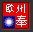
<style>
.page{position:relative;width:33px;height:32px;background:#f20000}
.page>*{position:absolute;margin:0}
.t1{font:10.4px "SimSun";color:#ffffff}
.t2{font:11.7px "SimSun";color:#ffffff}
</style>
<div class="page">
<p class="t1" style="left:6px;top:4px;width:19px;height:9px">欧州</p>
<p class="t2" style="left:16px;top:15px;width:11px;height:12px">奉</p>
</div>
